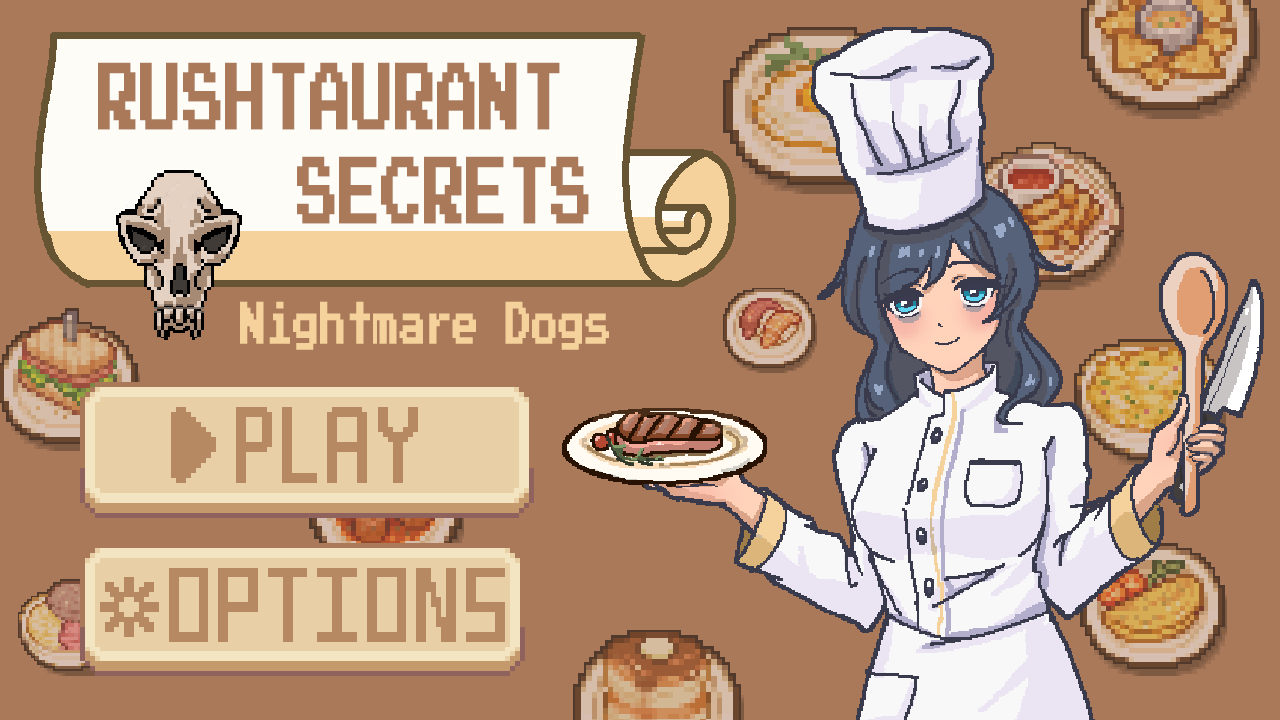
<style>
.page{position:relative;width:1280px;height:720px;background:#aa7959}
.page>*{position:absolute;margin:0}
.t1{font:75.2px "PressStart2P";letter-spacing:-0.01em;color:#aa7959;font-weight:bold;scale:0.55 1}
.t2{font:47.2px "PressStart2P";letter-spacing:-0.01em;color:#f5d19c;font-weight:bold;scale:0.55 1}
</style>
<div class="page">
<p class="t1" style="left:98px;top:62px;width:462px;height:68px">RUSHTAURANT</p>
<p class="t1" style="left:297px;top:156px;width:292px;height:68px">SECRETS</p>
<p class="t2" style="left:240px;top:301px;width:369px;height:49px">Nightmare Dogs</p>
</div>
